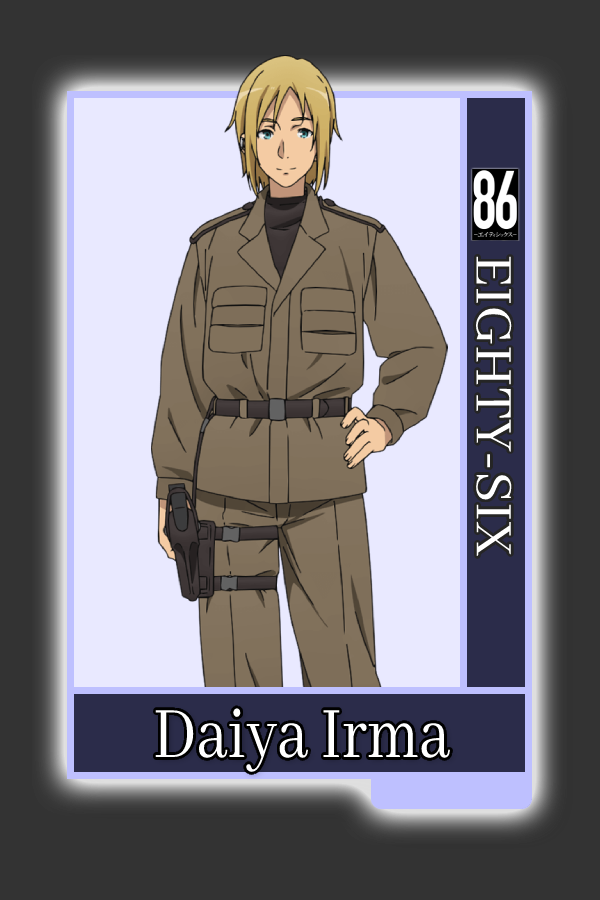
<style>
.page{position:relative;width:600px;height:900px;background:#333333}
.page>*{position:absolute;margin:0}
.t1{font:58.2px "AbhayaLibre-Regular";color:#ffffff}
.t2{font:79.6px "AbhayaLibre-Regular";color:#ffffff;scale:0.83 1}
</style>
<div class="page">
<p class="t1" style="left:476px;top:256px;width:36px;height:300px;rotate:90deg">EIGHTY-SIX</p>
<p class="t2" style="left:155px;top:708px;width:295px;height:64px">Daiya Irma</p>
</div>
